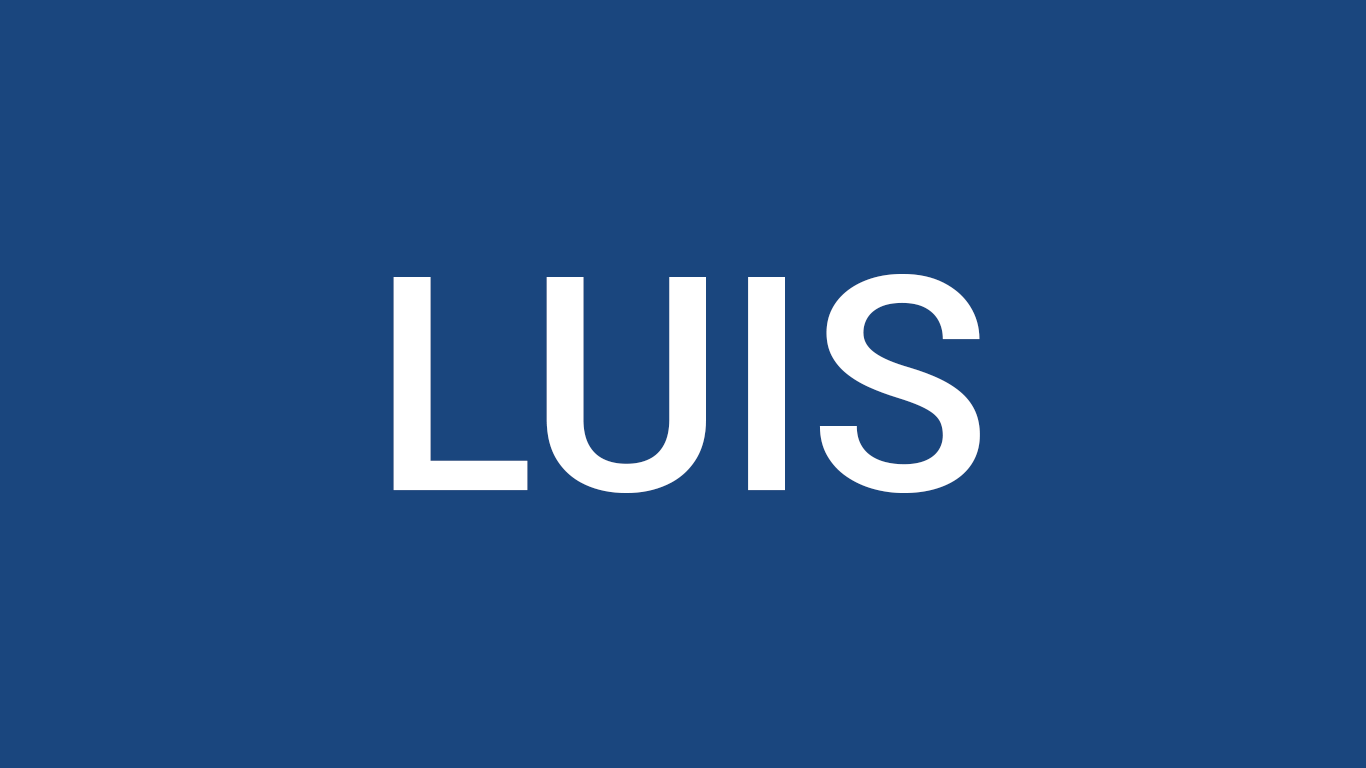
<style>
.page{position:relative;width:1366px;height:768px;background:#1a467e}
.page>*{position:absolute;margin:0}
.t1{font:300px "Roboto-Medium";color:#ffffff}
</style>
<div class="page">
<p class="t1" style="left:393px;top:274px;width:587px;height:219px">LUIS</p>
</div>
